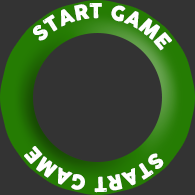
<style>
.page{position:relative;width:195px;height:195px;background:#333333}
.page>*{position:absolute;margin:0}
.t1{font:20px/32px "COCOGOOSELETTERPRESS";color:#ffffff;text-transform:uppercase}
</style>
<div class="page">
<p class="t1" style="left:33px;top:3px;width:139px;height:48px;text-align:center">Start Game</p>
<p class="t1" style="left:24px;top:146px;width:140px;height:47px;text-align:center">Start Game</p>
</div>
